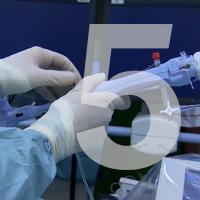
<style>
.page{position:relative;width:200px;height:200px}
.page>*{position:absolute;margin:0}
.t1{font:208.3px "PostGrotesk-Bold"}
</style>
<div class="page">
<p class="t1" style="left:76px;top:24px;width:105px;height:146px">5</p>
</div>
